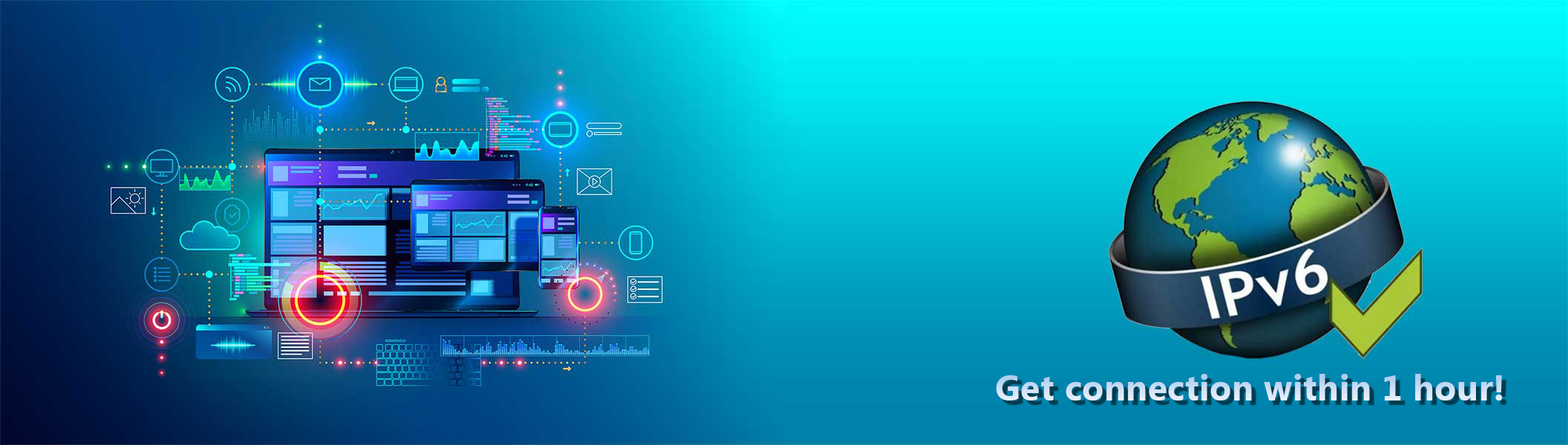
<style>
.page{position:relative;width:1568px;height:445px}
.page>*{position:absolute;margin:0}
.t1{font:35.6px "MicrosoftNewTaiLue-Bold";letter-spacing:0.01em;color:#d0e1f7}
</style>
<div class="page">
<p class="t1" style="left:996px;top:374px;width:507px;height:27px">Get connection within 1 hour!</p>
</div>
